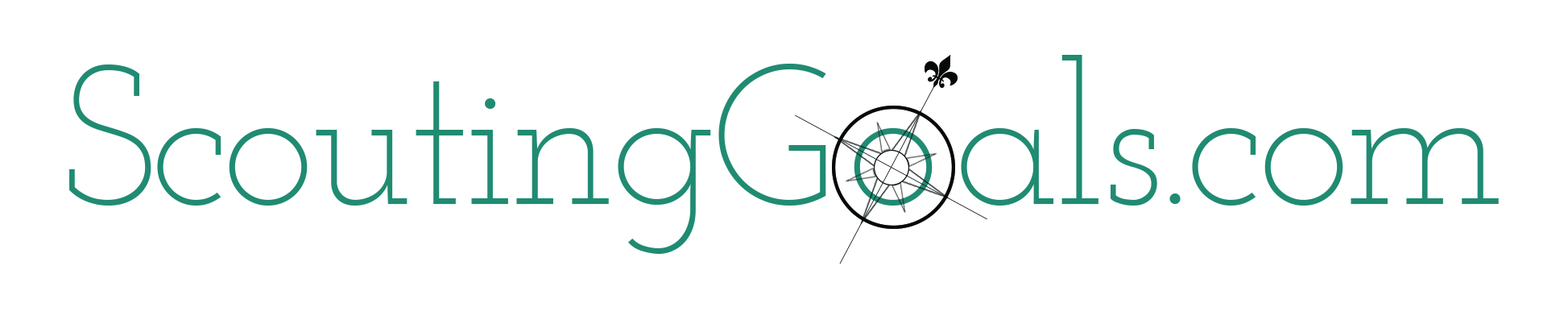
<style>
.page{position:relative;width:1568px;height:320px;background:#ffffff}
.page>*{position:absolute;margin:0}
.t1{font:198px "JosefinSlab-Light";letter-spacing:-0.025em;color:#208b72}
.t2{font:198px "JosefinSlab-Light";letter-spacing:0.075em;color:#208b72}
</style>
<div class="page">
<p class="t1" style="left:69px;top:55px;width:1430px;height:199px">Scouting<span class="t2">Go</span>als.com</p>
</div>
